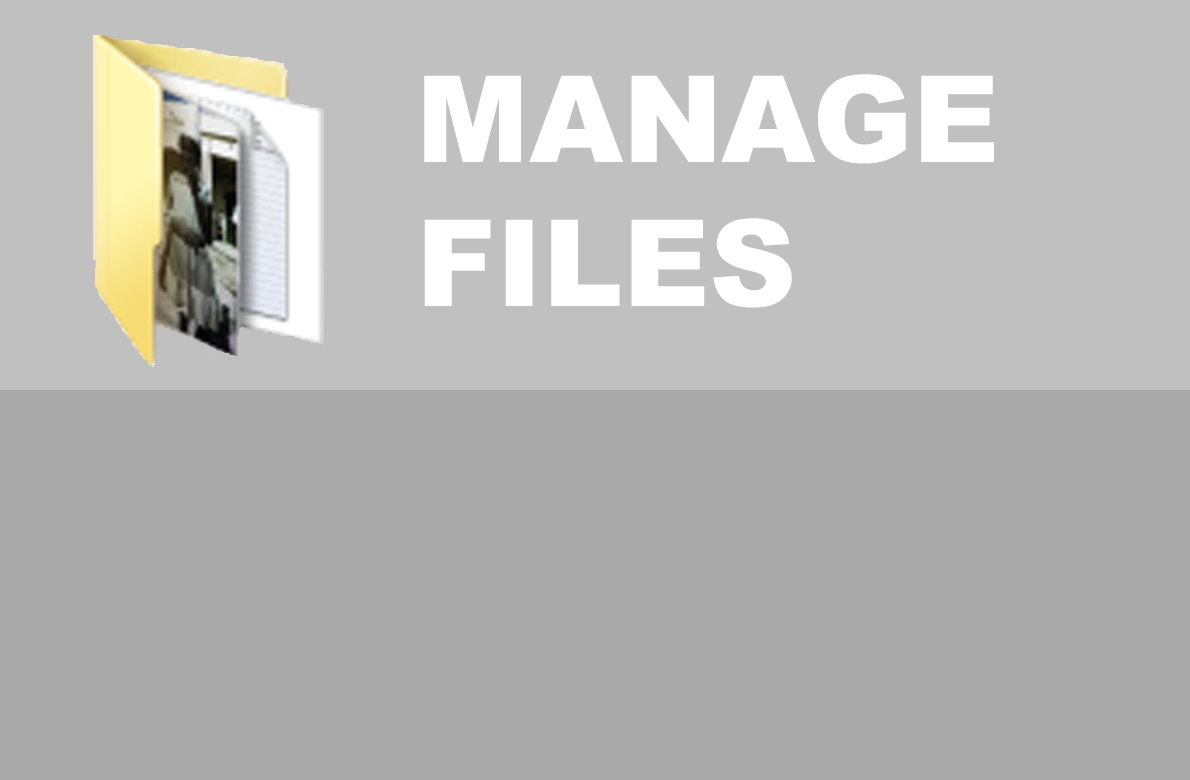
<style>
.page{position:relative;width:1190px;height:780px;background:#aaaaaa}
.page>*{position:absolute;margin:0}
.t1{font:120px "Arial-Black";color:#ffffff}
</style>
<div class="page">
<p class="t1" style="left:424px;top:74px;width:570px;height:234px">MANAGE<br>FILES</p>
</div>
